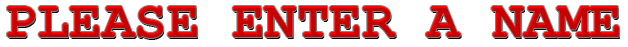
<style>
.page{position:relative;width:628px;height:47px;background:#ffffff}
.page>*{position:absolute;margin:0}
.t1{font:54.2px "CourierNewPS-BoldMT";color:#c60000}
</style>
<div class="page">
<p class="t1" style="left:7px;top:6px;width:612px;height:32px">PLEASE ENTER A NAME</p>
</div>
